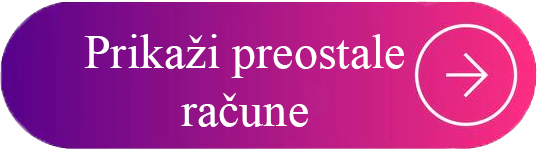
<style>
.page{position:relative;width:538px;height:150px}
.page>*{position:absolute;margin:0}
.t1{font:48px "TimesNewRomanPSMT";color:#ffffff}
</style>
<div class="page">
<p class="t1" style="left:84px;top:34px;width:320px;height:93px;text-align:center">Prikaži preostale račune</p>
</div>
